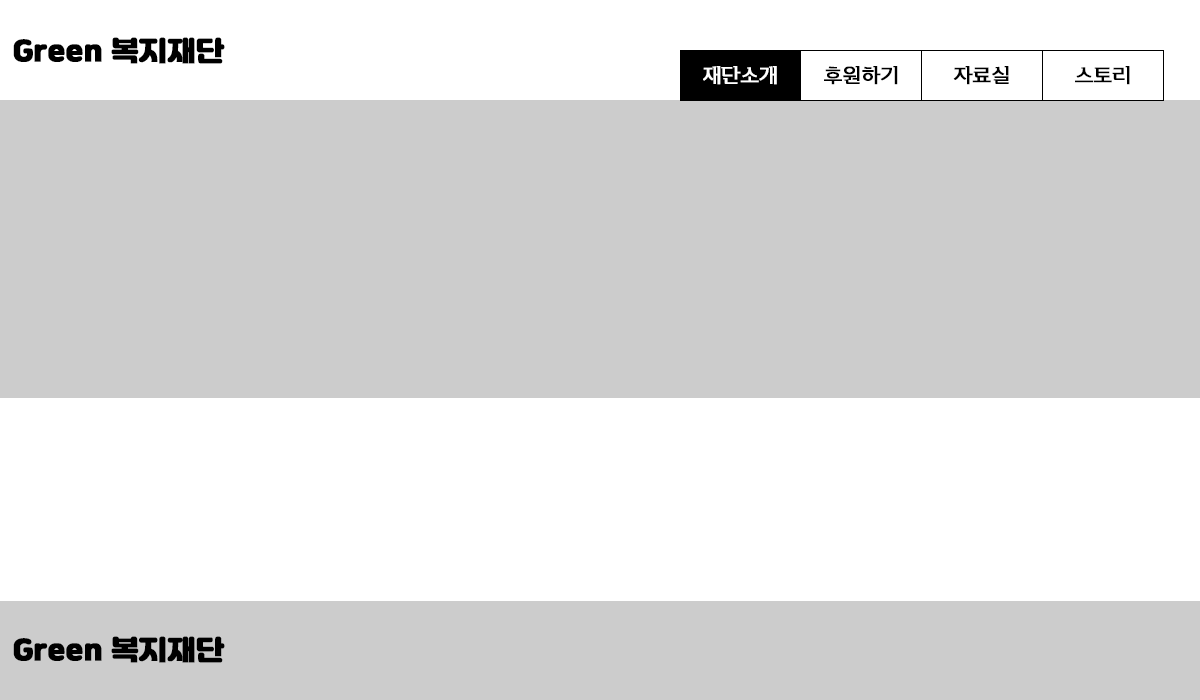
<style>
.page{position:relative;width:1200px;height:700px;background:#cccccc}
.page>*{position:absolute;margin:0}
.t1{font:27.3px "Jalnan";letter-spacing:-0.02em;color:#000000;font-weight:bold}
.t2{font:20.2px "TTWanjunuricheR";letter-spacing:-0.02em;color:#ffffff;font-weight:bold}
.t3{font:20.2px "TTWanjunuricheR";letter-spacing:-0.02em;color:#000000;font-weight:bold}
</style>
<div class="page">
<p class="t1" style="left:13px;top:37px;width:212px;height:27px">Green 복지재단</p>
<p class="t2" style="left:703px;top:66px;width:74px;height:19px">재단소개</p>
<p class="t3" style="left:824px;top:66px;width:74px;height:19px">후원하기</p>
<p class="t3" style="left:953px;top:66px;width:56px;height:19px">자료실</p>
<p class="t3" style="left:1075px;top:66px;width:55px;height:19px">스토리</p>
<p class="t1" style="left:13px;top:636px;width:212px;height:27px">Green 복지재단</p>
</div>
